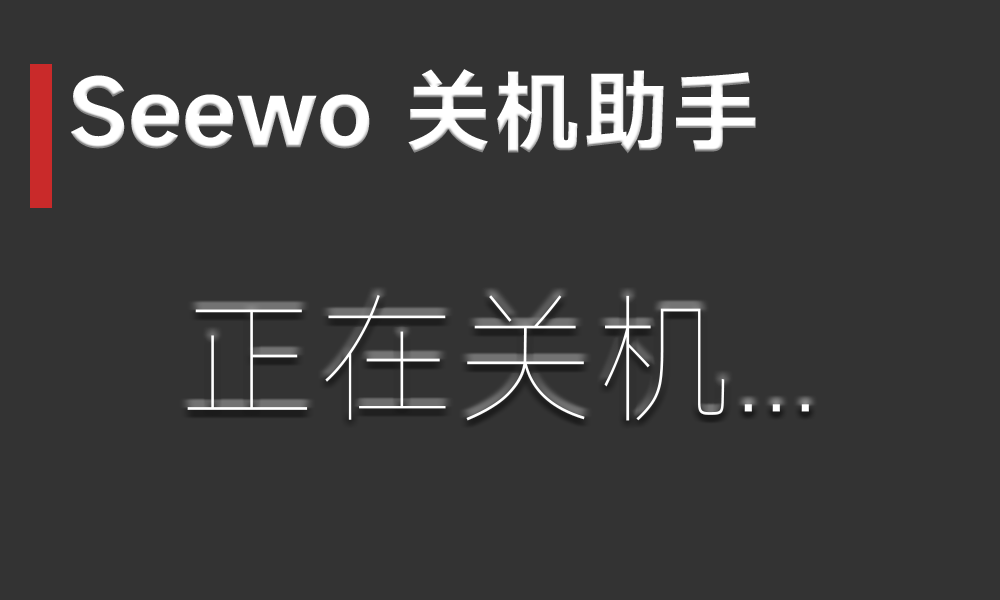
<style>
.page{position:relative;width:1000px;height:600px;background:#333333}
.page>*{position:absolute;margin:0}
.t1{font:88.9px "MiSans-Semibold";color:#ffffff}
.t2{font:138.9px "MiSans-Thin";color:#ffffff}
</style>
<div class="page">
<p class="t1" style="left:71px;top:69px;width:685px;height:85px">Seewo 关机助手</p>
<p class="t2" style="left:187px;top:295px;width:622px;height:126px">正在关机...</p>
</div>
